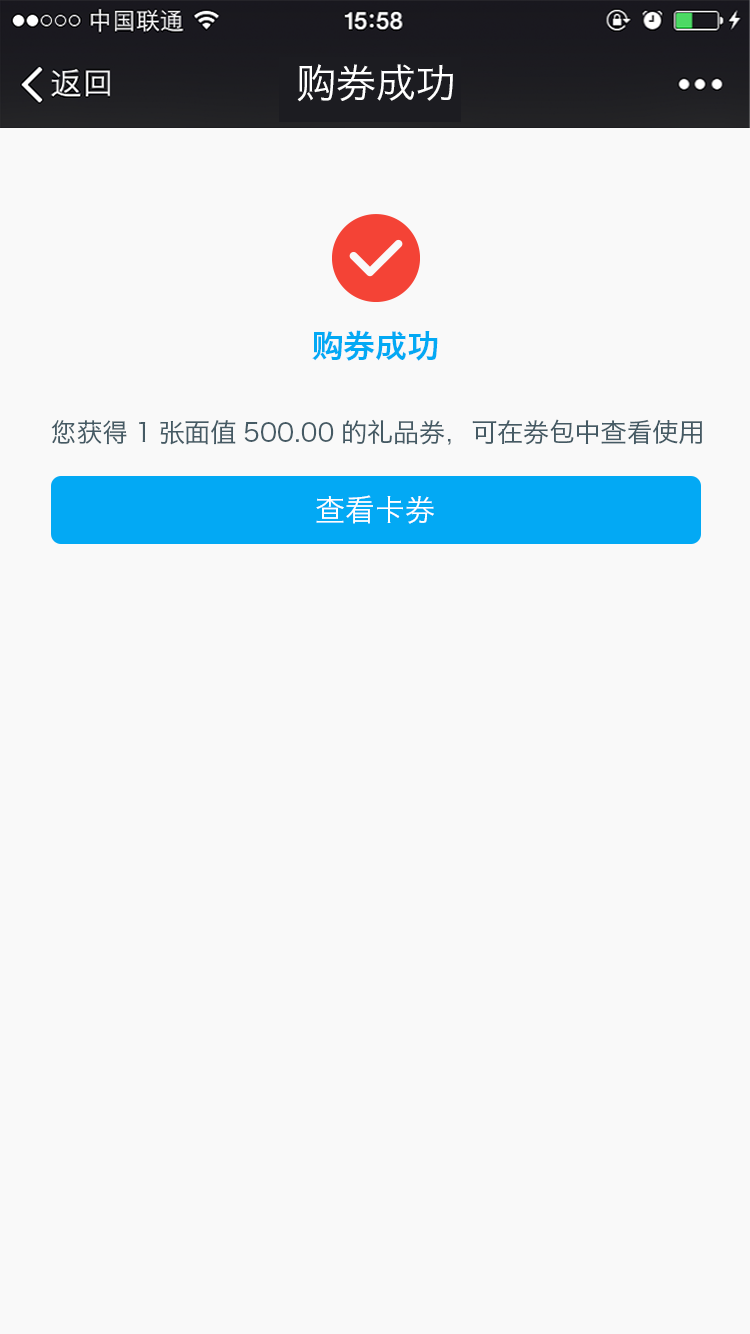
<style>
.page{position:relative;width:750px;height:1334px;background:#f9f9f9}
.page>*{position:absolute;margin:0}
.t1{font:40px "HiraginoSansGB-W3";color:#ffffff}
.t2{font:32px "HiraginoSansGB-W6";color:#03a9f4}
.t3{font:26px "HiraginoSansGB-W3";color:#455a64}
.t4{font:30px "HiraginoSansGB-W3";color:#ffffff}
</style>
<div class="page">
<p class="t1" style="left:297px;top:64px;width:156px;height:38px">购券成功</p>
<p class="t2" style="left:312px;top:330px;width:126px;height:31px">购券成功</p>
<p class="t3" style="left:51px;top:419px;width:651px;height:26px">您获得1张面值500.00的礼品券，可在券包中查看使用</p>
<p class="t4" style="left:316px;top:495px;width:118px;height:29px">查看卡券</p>
</div>
